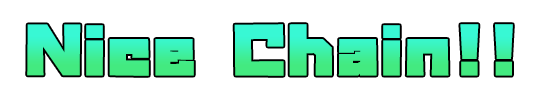
<style>
.page{position:relative;width:540px;height:100px;background:#ffffff}
.page>*{position:absolute;margin:0}
.t1{font:55px "GN-KMBFont-UB-OldstyleKana";letter-spacing:0.07em;scale:1.1 1}
</style>
<div class="page">
<p class="t1" style="left:27px;top:24px;width:486px;height:52px">Nice Chain!!</p>
</div>
